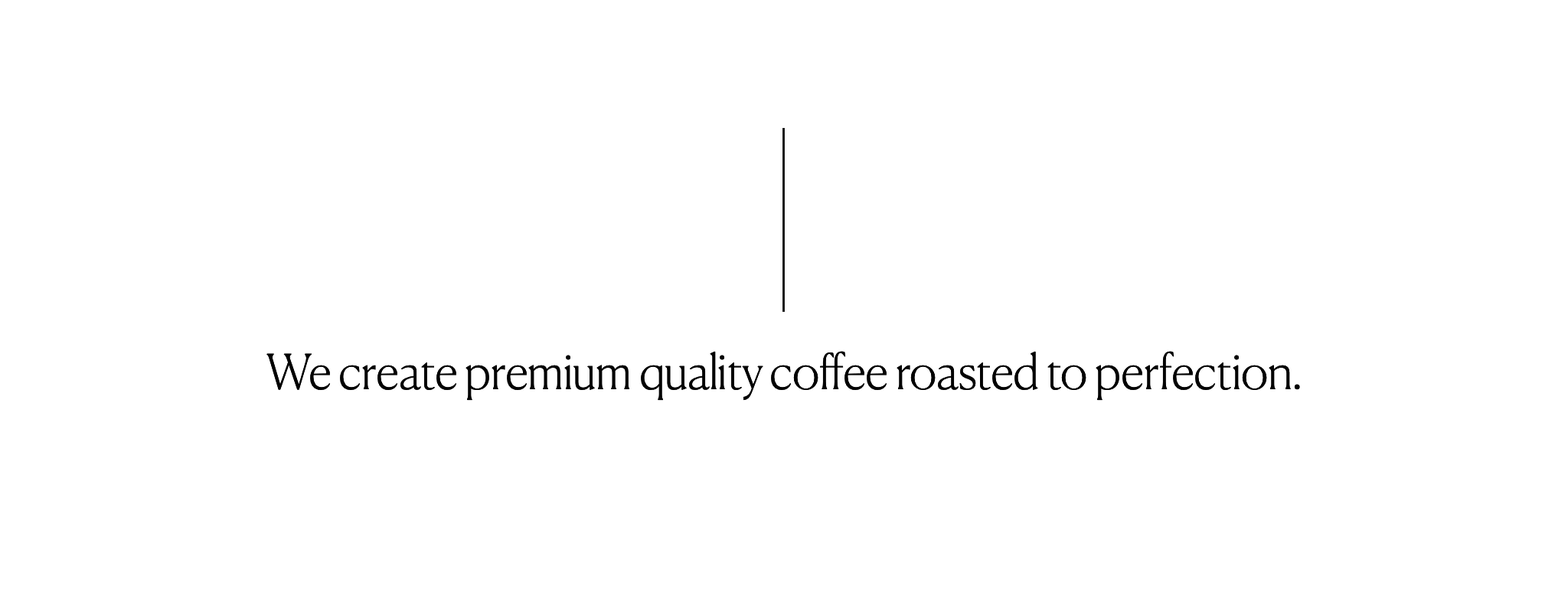
<style>
.page{position:relative;width:1568px;height:603px;background:#ffffff}
.page>*{position:absolute;margin:0}
.t1{font:47.9px "Canela-Thin";color:#020202}
</style>
<div class="page">
<p class="t1" style="left:266px;top:351px;width:1034px;height:49px">We create premium quality coffee roasted to perfection.</p>
</div>
